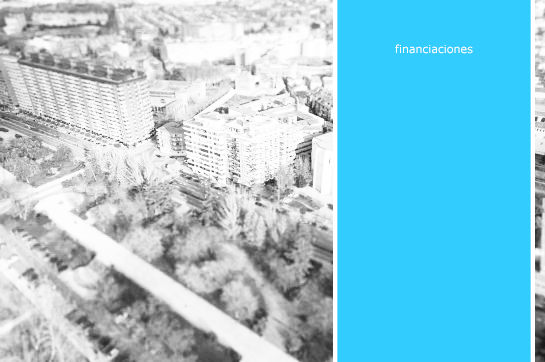
<style>
.page{position:relative;width:545px;height:362px;background:#33ccff}
.page>*{position:absolute;margin:0}
.t1{font:11.1px "MSReferenceSansSerif";color:#ffffff}
</style>
<div class="page">
<p class="t1" style="left:395px;top:44px;width:78px;height:10px">financiaciones</p>
</div>
